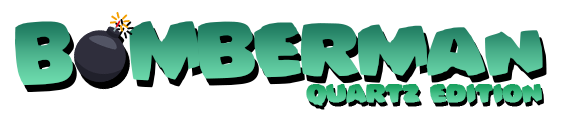
<style>
.page{position:relative;width:564px;height:130px;background:#ffffff}
.page>*{position:absolute;margin:0}
.t1{font:72px "Bomberman";letter-spacing:0.005em}
.t2{font:24px "Bomberman";letter-spacing:0.005em;font-weight:bold}
</style>
<div class="page">
<p class="t1" style="left:15px;top:21px;width:528px;height:64px">B  mberman</p>
<p class="t2" style="left:306px;top:84px;width:236px;height:22px">QUARTZ edition</p>
</div>
